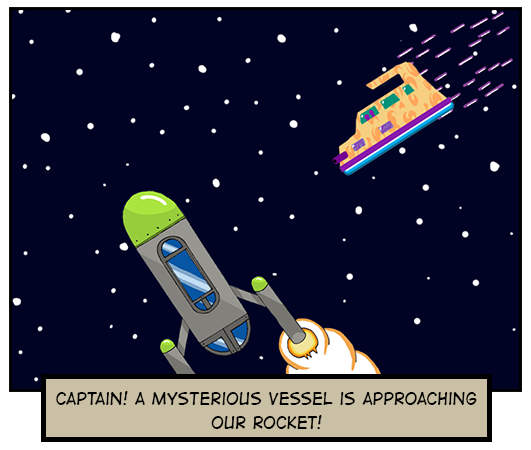
<style>
.page{position:relative;width:531px;height:450px;background:#000324}
.page>*{position:absolute;margin:0}
.t1{font:20.3px "DigitalStripBB";color:#000000}
</style>
<div class="page">
<p class="t1" style="left:56px;top:391px;width:421px;height:38px;text-align:center">Captain! A mysterious vessel is approaching our rocket!</p>
</div>
